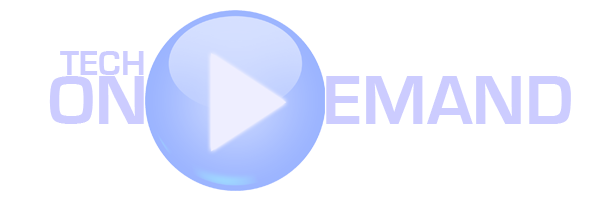
<style>
.page{position:relative;width:600px;height:200px;background:#ffffff}
.page>*{position:absolute;margin:0}
.t1{font:36px "EurostileBold";color:#ccccff}
.t2{font:72px "EurostileBold";color:#ccccff}
</style>
<div class="page">
<p class="t1" style="left:60px;top:51px;width:84px;height:24px">TECH</p>
<p class="t2" style="left:49px;top:76px;width:95px;height:48px">ON</p>
<p class="t2" style="left:326px;top:76px;width:245px;height:48px">EMAND</p>
</div>
